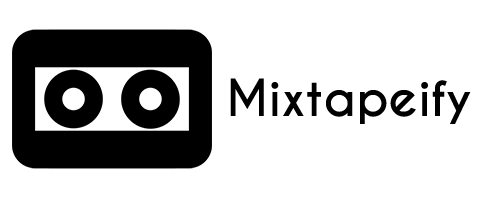
<style>
.page{position:relative;width:500px;height:200px;background:#ffffff}
.page>*{position:absolute;margin:0}
.t1{font:48px "CaviarDreams-Bold";color:#000000}
</style>
<div class="page">
<p class="t1" style="left:230px;top:78px;width:241px;height:46px">Mixtapeify</p>
</div>
